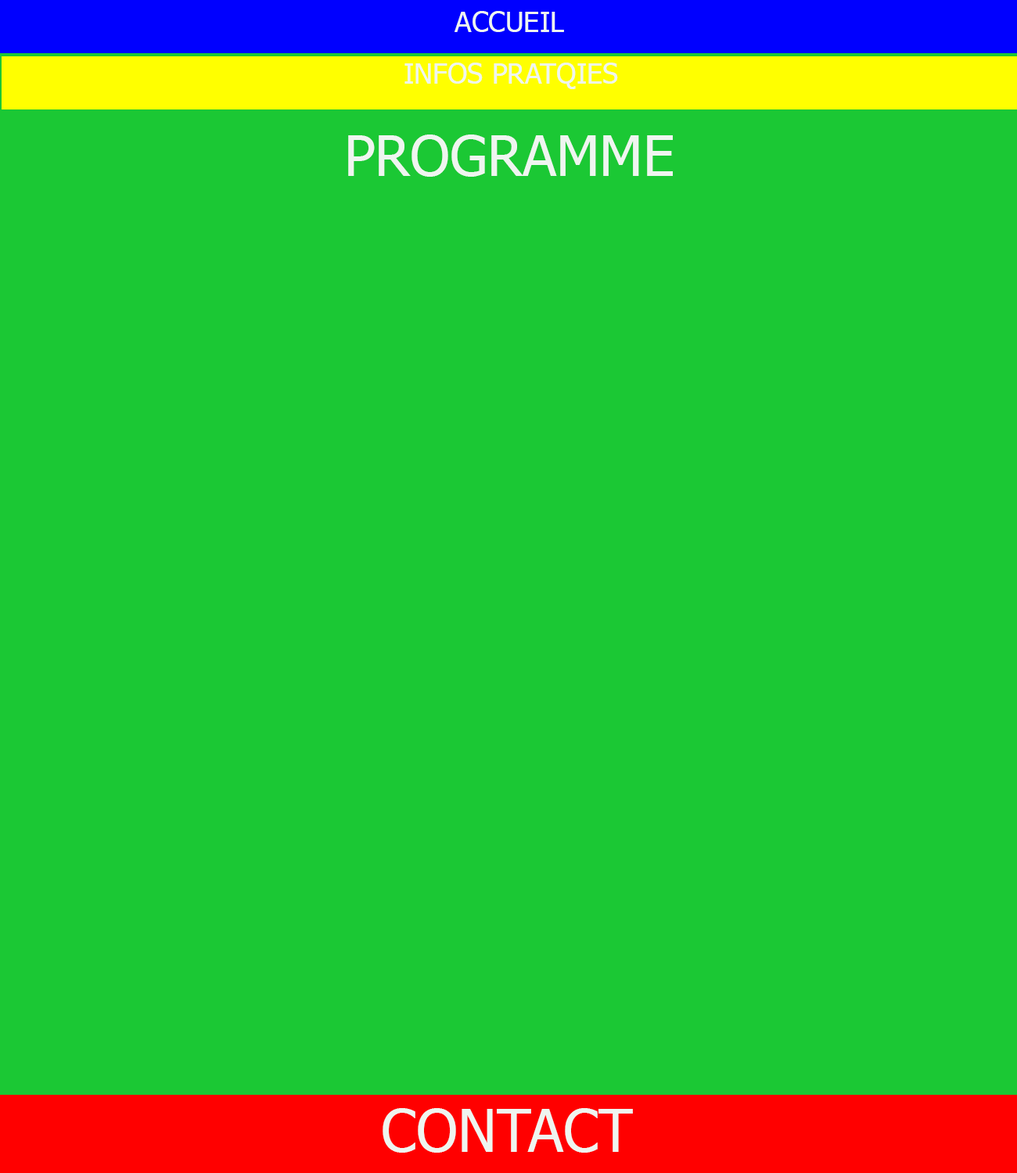
<style>
.page{position:relative;width:1017px;height:1173px;background:#1bc834}
.page>*{position:absolute;margin:0}
.t1{font:28.2px "Tahoma";color:#eff5f0}
.t2{font:56.3px "Tahoma";color:#eff5f0}
.t3{font:58.6px "Tahoma";color:#eff5f0}
</style>
<div class="page">
<p class="t1" style="left:454px;top:11px;width:110px;height:21px">ACCUEIL</p>
<p class="t1" style="left:404px;top:63px;width:214px;height:26px">INFOS PRATQIES</p>
<p class="t2" style="left:348px;top:135px;width:325px;height:42px">PROGRAMME</p>
<p class="t3" style="left:382px;top:1108px;width:251px;height:45px">CONTACT</p>
</div>
